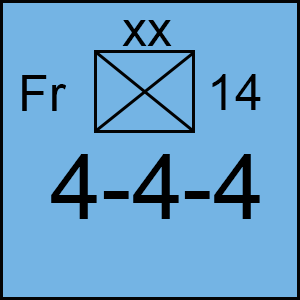
<style>
.page{position:relative;width:300px;height:300px;background:#74b4e4}
.page>*{position:absolute;margin:0}
.t1{font:50px "ArialMT";color:#000000}
.t2{font:91.7px "ArialMT";color:#000000}
</style>
<div class="page">
<p class="t1" style="left:122px;top:20px;width:50px;height:26px">xx</p>
<p class="t1" style="left:22px;top:75px;width:44px;height:36px">Fr</p>
<p class="t1" style="left:212px;top:74px;width:49px;height:36px">14</p>
<p class="t2" style="left:51px;top:154px;width:209px;height:65px">4-4-4</p>
</div>
